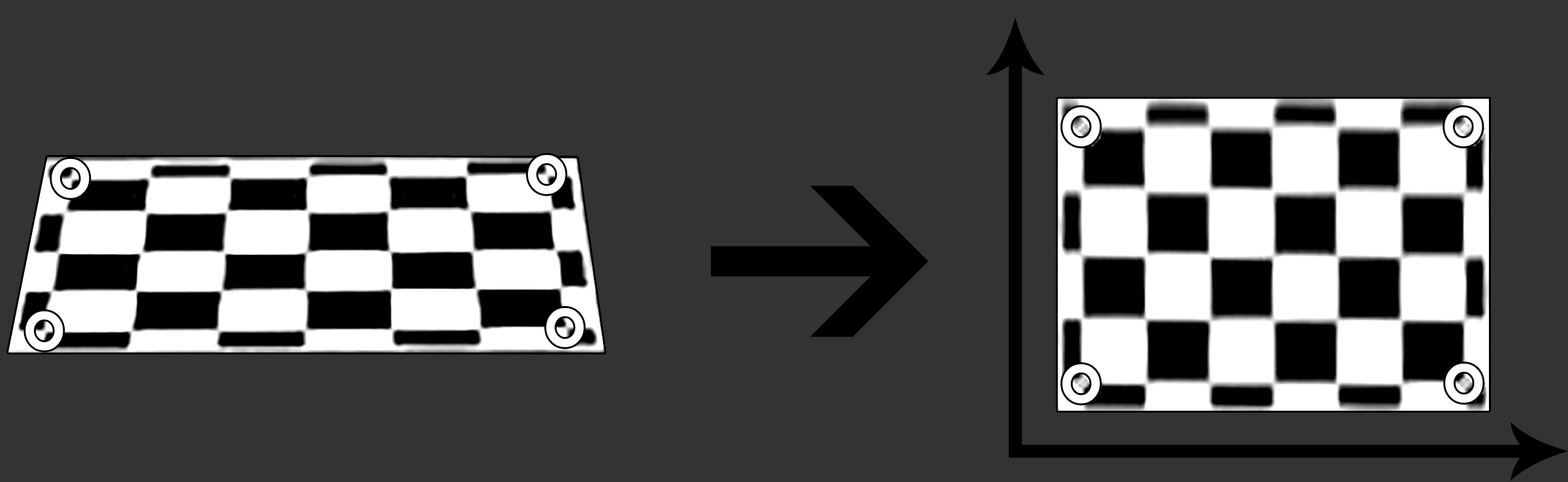
<style>
.page{position:relative;width:1568px;height:482px;background:#333333}
.page>*{position:absolute;margin:0}
.t1{font:78.4px "BerlinSansFB-Reg";letter-spacing:-0.04em;color:#ffffff}
</style>
<div class="page">
<p class="t1" style="left:1062px;top:107px;width:38px;height:39px">o</p>
<p class="t1" style="left:1445px;top:107px;width:37px;height:39px">o</p>
<p class="t1" style="left:52px;top:159px;width:38px;height:39px">o</p>
<p class="t1" style="left:528px;top:155px;width:38px;height:39px">o</p>
<p class="t1" style="left:25px;top:311px;width:38px;height:39px">o</p>
<p class="t1" style="left:546px;top:308px;width:38px;height:39px">o</p>
<p class="t1" style="left:1062px;top:364px;width:38px;height:39px">o</p>
<p class="t1" style="left:1445px;top:363px;width:38px;height:39px">o</p>
</div>
